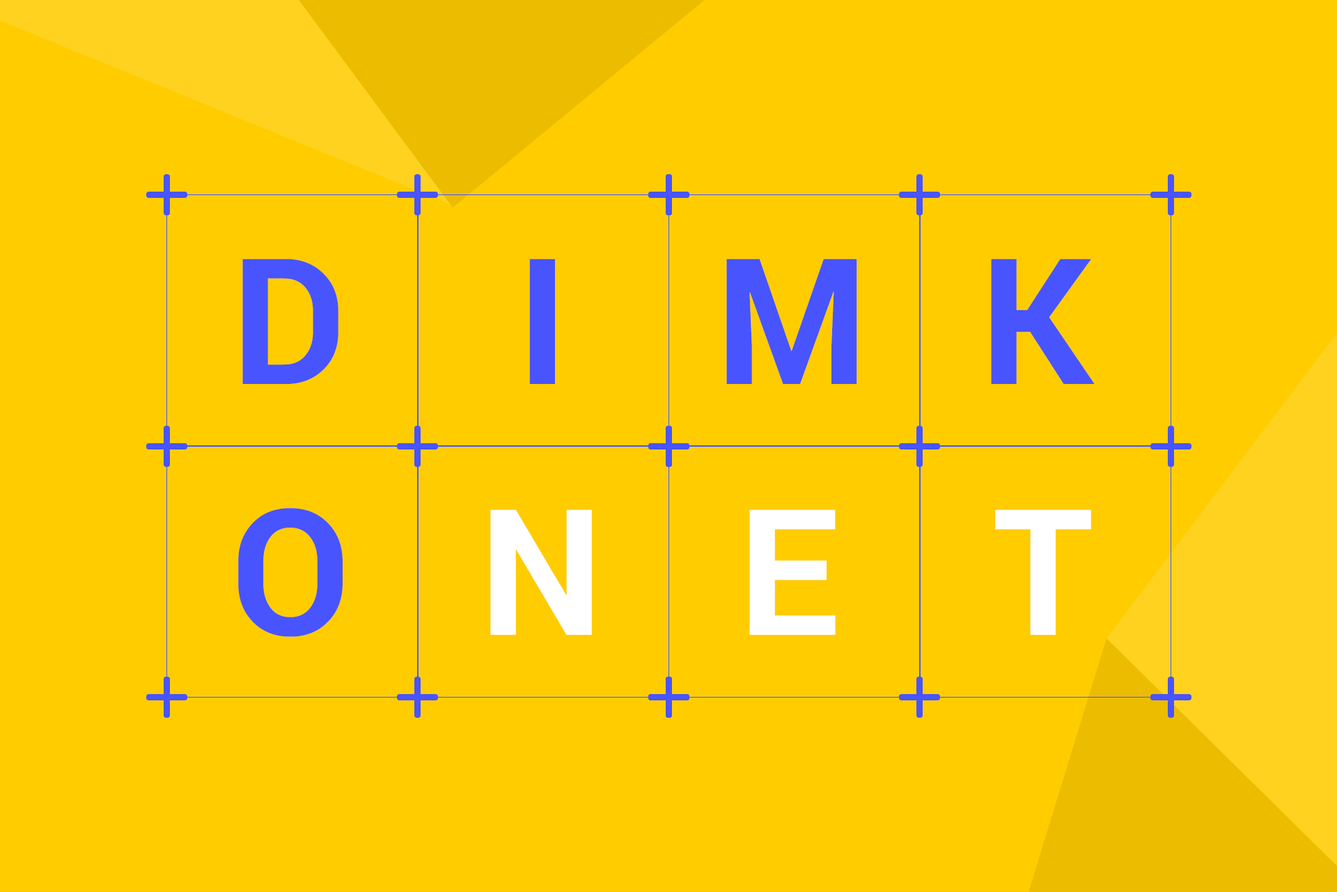
<style>
.page{position:relative;width:1337px;height:892px;background:#ffcc00}
.page>*{position:absolute;margin:0}
.t1{font:175.5px "Roboto-Bold";color:#4855fe}
.t2{font:175.5px "Roboto-Bold";color:#ffffff}
</style>
<div class="page">
<p class="t1" style="left:242px;top:258px;width:97px;height:126px">D</p>
<p class="t1" style="left:529px;top:258px;width:26px;height:126px">I</p>
<p class="t1" style="left:727px;top:258px;width:130px;height:126px">M</p>
<p class="t1" style="left:991px;top:258px;width:104px;height:126px">K</p>
<p class="t1" style="left:238px;top:508px;width:105px;height:129px">O</p>
<p class="t2" style="left:490px;top:509px;width:102px;height:126px">N</p>
<p class="t2" style="left:750px;top:509px;width:86px;height:126px">E</p>
<p class="t2" style="left:995px;top:509px;width:97px;height:126px">T</p>
</div>
